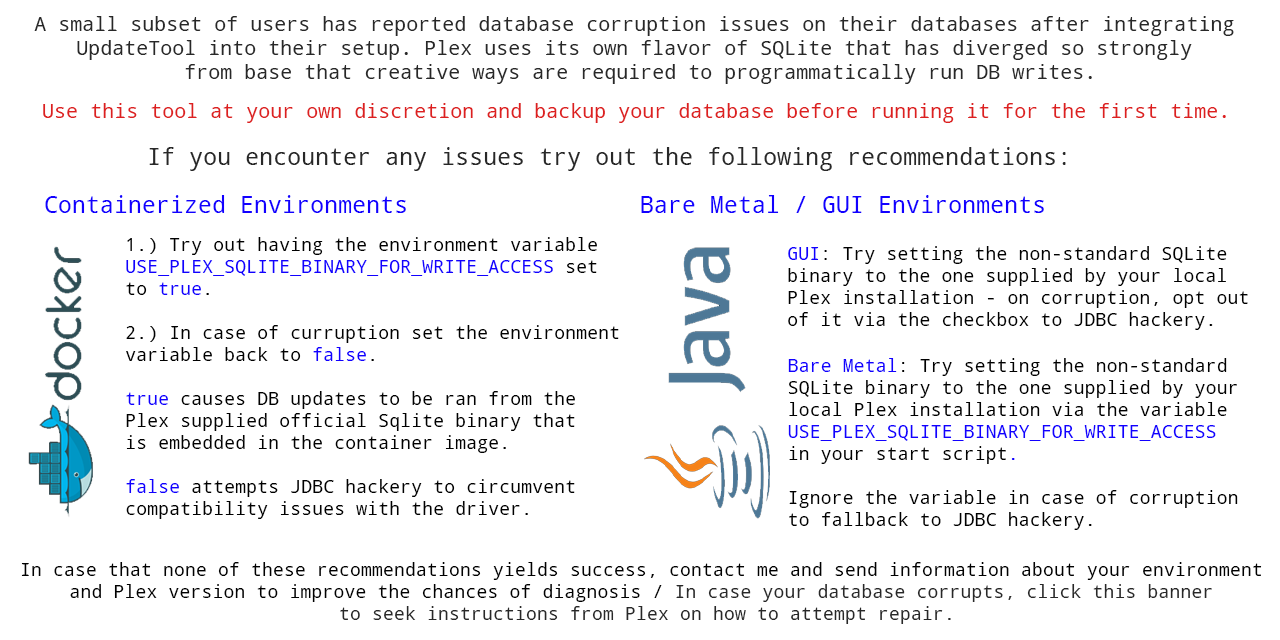
<style>
.page{position:relative;width:1280px;height:640px;background:#ffffff}
.page>*{position:absolute;margin:0}
.t1{font:20px "NotoMono";color:#282828}
.t2{font:20px "NotoMono";color:#dd2020}
.t3{font:23.3px "NotoMono";color:#282828}
.t4{font:23.3px "NotoMono";color:#1200ff}
.t5{font:18.3px "NotoMono";color:#000000}
.t6{font:18.3px "NotoMono";color:#1200ff}
.t7{font:18.3px "NotoMono";color:#282828}
</style>
<div class="page">
<p class="t1" style="left:34px;top:16px;width:1200px;height:68px;text-align:center">A small subset of users has reported database corruption issues on their databases after integrating <br>UpdateTool into their setup. Plex uses its own flavor of SQLite that has diverged so strongly <br>from base that creative ways are required to programmatically run DB writes.</p>
<p class="t2" style="left:43px;top:103px;width:1183px;height:20px">Use this tool at your own discretion and backup your database before running it for the first time.</p>
<p class="t3" style="left:149px;top:147px;width:917px;height:24px">If you encounter any issues try out the following recommendations:</p>
<p class="t4" style="left:45px;top:195px;width:361px;height:18px">Containerized Environments</p>
<p class="t4" style="left:641px;top:195px;width:403px;height:18px">Bare Metal / GUI Environments</p>
<p class="t5" style="left:126px;top:237px;width:493px;height:282px">1.) Try out having the environment variable <br><span class="t6">USE_PLEX_SQLITE_BINARY_FOR_WRITE_ACCESS </span>set<br>to <span class="t6">true</span>.<br><br>2.) In case of curruption set the environment<br>variable back to <span class="t6">false</span>. <br><br><span class="t6">true </span>causes DB updates to be ran from the<br>Plex supplied official Sqlite binary that<br>is embedded in the container image.<br><br><span class="t6">false </span>attempts JDBC hackery to circumvent <br>compatibility issues with the driver.</p>
<p class="t5" style="left:788px;top:246px;width:460px;height:84px"><span class="t6"> GUI</span>: Try setting the non-standard SQLite<br> binary to the one supplied by your local <br> Plex installation - on corruption, opt out <br> of it via the checkbox to JDBC hackery.</p>
<p class="t5" style="left:788px;top:358px;width:450px;height:172px"><span class="t6">Bare Metal</span>: Try setting the non-standard<br>SQLite binary to the one supplied by your<br>local Plex installation via the variable<br><span class="t6">USE_PLEX_SQLITE_BINARY_FOR_WRITE_ACCESS<br></span>in your start script<span class="t6">.<br><br></span>Ignore the variable in case of corruption<br>to fallback to JDBC hackery.</p>
<p class="t5" style="left:21px;top:562px;width:1241px;height:62px;text-align:center">In case that none of these recommendations yields success, contact me and send information about your environment <br>and Plex version to improve the chances of diagnosis / <span class="t7">In case your database corrupts, click this banner <br>to seek instructions from Plex on how to attempt repair.</span></p>
</div>
